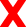
<style>
.page{position:relative;width:26px;height:27px;background:#ff0000}
.page>*{position:absolute;margin:0}
.t1{font:38.7px "Megatron";color:#ff0000;scale:1.28 1}
</style>
<div class="page">
<p class="t1" style="left:0px;top:0px;width:27px;height:27px">X</p>
</div>
